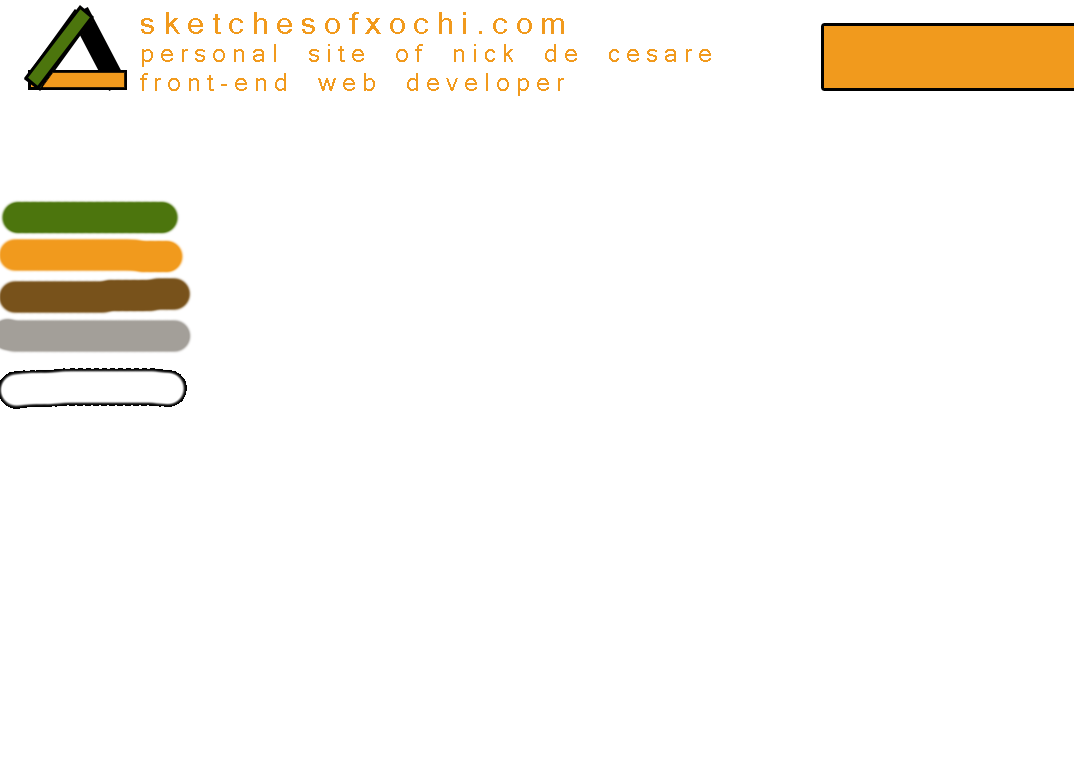
<style>
.page{position:relative;width:1074px;height:768px;background:#ffffff}
.page>*{position:absolute;margin:0}
.t1{font:24px "Kartika";letter-spacing:0.25em;color:#f19a1d}
.t2{font:30px "Kartika";letter-spacing:0.25em;color:#f19a1d}
</style>
<div class="page">
<p class="t1" style="left:140px;top:12px;width:571px;height:84px"><span class="t2">sketchesofxochi.com<br></span>personal site of nick de cesare <br>front-end web developer</p>
</div>
